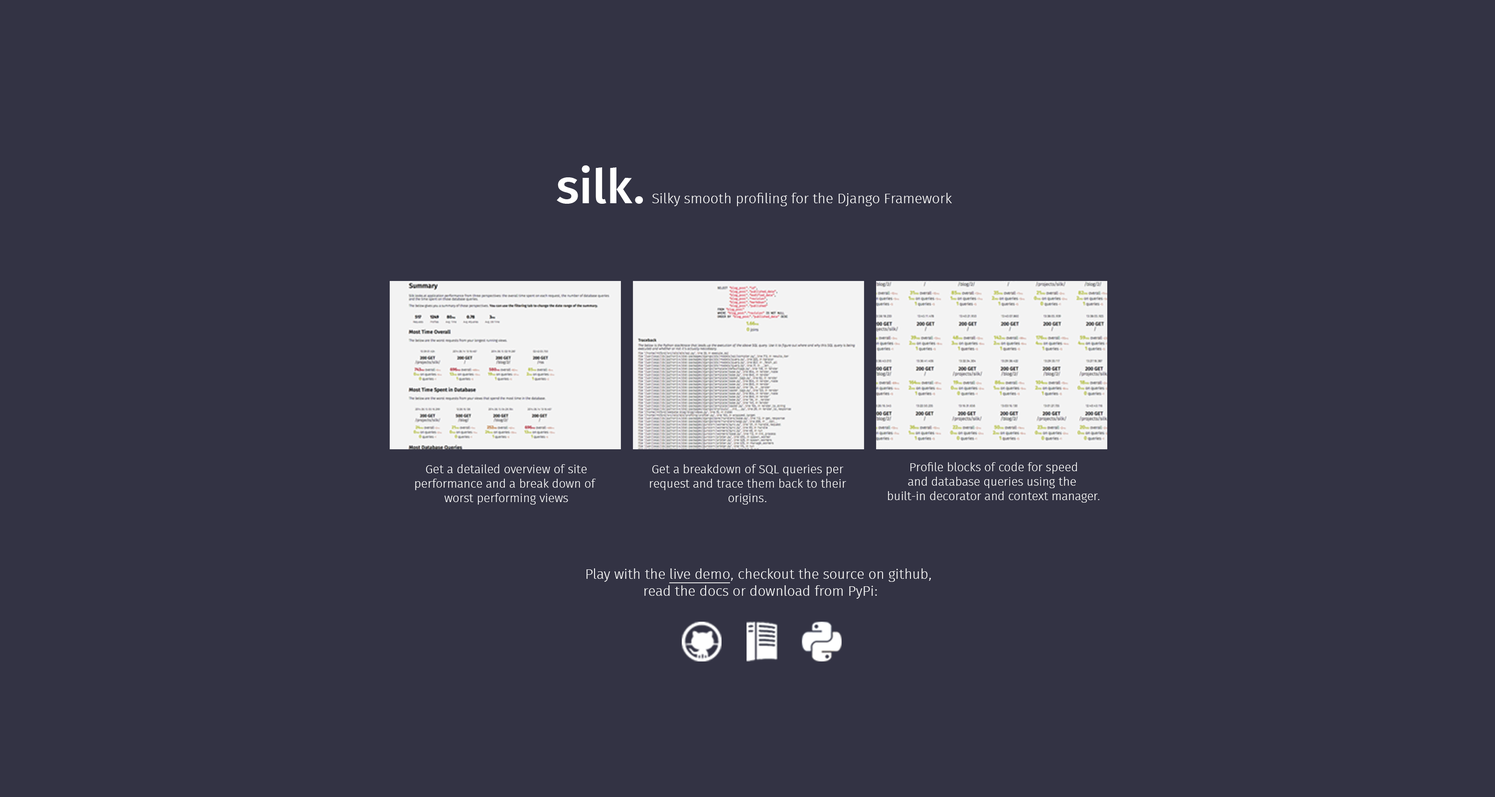
<style>
.page{position:relative;width:1495px;height:797px;background:#333344}
.page>*{position:absolute;margin:0}
.t1{font:47.8px "FiraSansMedium";color:#ffffff}
.t2{font:14px "FiraSansLight";color:#ffffff}
.t3{font:12px "FiraSansLight";color:#ffffff}
.t4{font:14px "FiraSansLight";color:#ffffff;text-decoration:underline}
</style>
<div class="page">
<p class="t1" style="left:557px;top:165px;width:86px;height:39px">silk.</p>
<p class="t2" style="left:652px;top:193px;width:300px;height:13px">Silky smooth profiling for the Django Framework</p>
<p class="t3" style="left:415px;top:465px;width:181px;height:40px;text-align:center">Get a detailed overview of site<br>performance and a break down of <br>worst performing views</p>
<p class="t3" style="left:650px;top:465px;width:196px;height:40px;text-align:center">Get a breakdown of SQL queries per<br>request and trace them back to their<br>origins.</p>
<p class="t3" style="left:888px;top:463px;width:212px;height:40px;text-align:center">Profile blocks of code for speed<br>and database queries using the <br>built-in decorator and context manager.</p>
<p class="t2" style="left:587px;top:569px;width:344px;height:30px;text-align:center">Play with the <span class="t4">live demo</span>, checkout the source on github, <br>read the docs or download from PyPi:</p>
</div>
